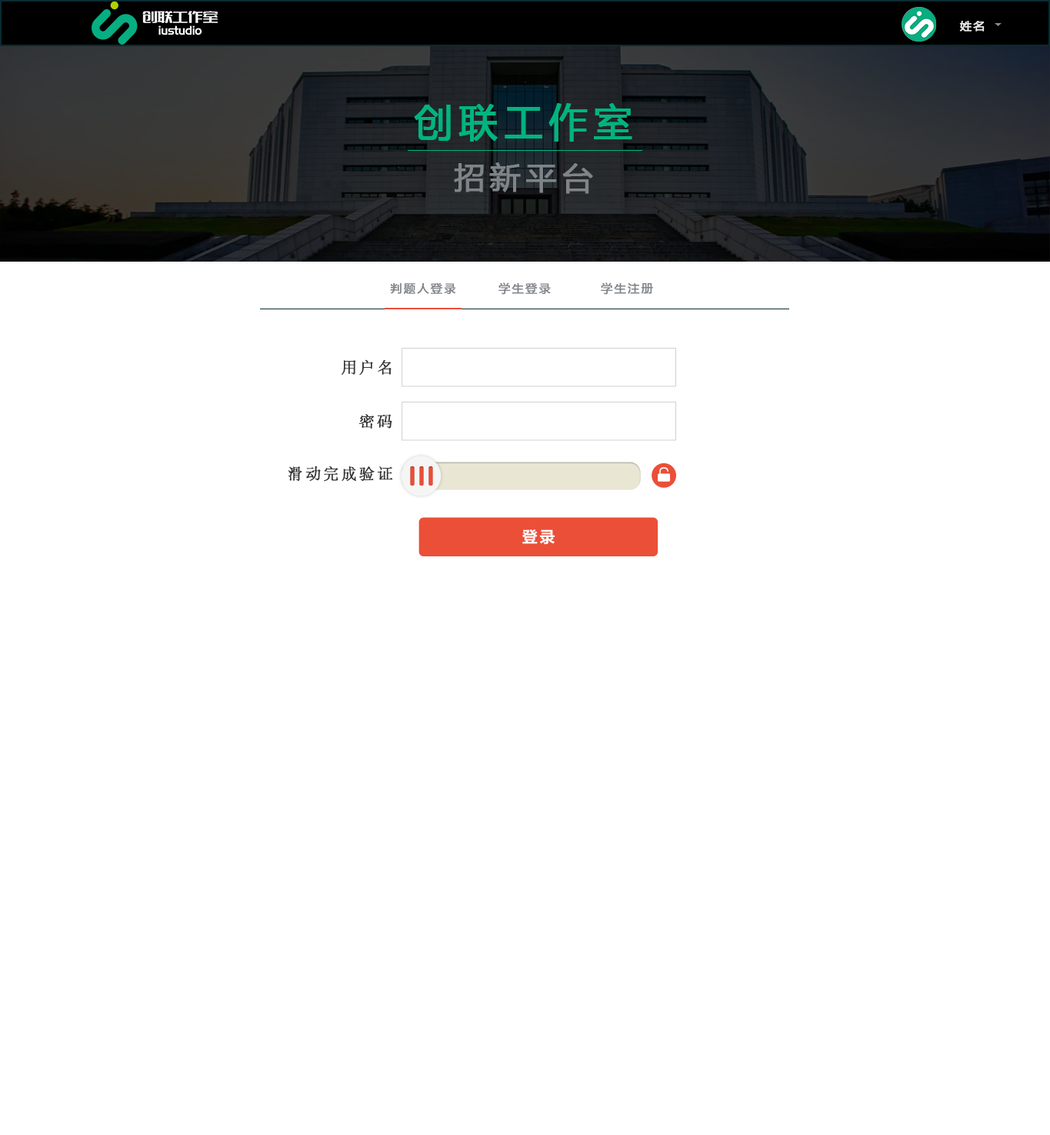
<style>
.page{position:relative;width:1050px;height:1135px;background:#ffffff}
.page>*{position:absolute;margin:0}
.t1{font:11.5px "MicrosoftYaHei";letter-spacing:0.14em;color:#eaeaea;font-weight:bold}
.t2{font:38.5px "MicrosoftYaHei";letter-spacing:0.14em;color:#00b480;font-weight:bold}
.t3{font:30.8px "MicrosoftYaHei";letter-spacing:0.14em;color:#7f8489;font-weight:bold}
.t4{font:11.5px "MicrosoftYaHei";letter-spacing:0.14em;color:#7f8489;font-weight:bold}
.t5{font:15.3px "AdobeSongStd-Light";letter-spacing:0.14em;color:#363636;font-weight:bold}
</style>
<div class="page">
<p class="t1" style="left:960px;top:21px;width:25px;height:11px">姓名</p>
<p class="t2" style="left:414px;top:103px;width:219px;height:39px">创联工作室</p>
<p class="t3" style="left:454px;top:162px;width:139px;height:32px">招新平台</p>
<p class="t4" style="left:390px;top:282px;width:66px;height:13px">判题人登录</p>
<p class="t4" style="left:499px;top:282px;width:52px;height:13px">学生登录</p>
<p class="t4" style="left:601px;top:282px;width:52px;height:13px">学生注册</p>
<p class="t5" style="left:342px;top:359px;width:50px;height:17px">用户名</p>
<p class="t5" style="left:359px;top:414px;width:33px;height:15px">密码</p>
<p class="t5" style="left:288px;top:466px;width:105px;height:16px">滑动完成验证</p>
</div>
